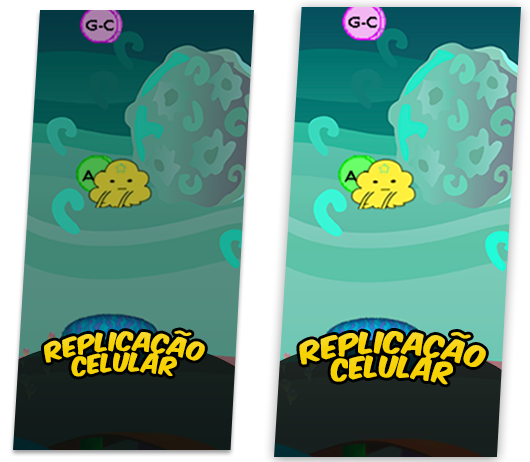
<style>
.page{position:relative;width:530px;height:462px}
.page>*{position:absolute;margin:0}
.t1{font:21.8px/20.8px "KomikaAxis";letter-spacing:0.01em;color:#f7d203}
.t2{font:25.2px/24.1px "KomikaAxis";letter-spacing:0.01em;color:#f7d203}
</style>
<div class="page">
<p class="t1" style="left:44px;top:330px;width:161px;height:47px;text-align:center">replicação<br>celular</p>
<p class="t2" style="left:299px;top:331px;width:187px;height:54px;text-align:center;rotate:2deg">replicação<br>celular</p>
</div>
